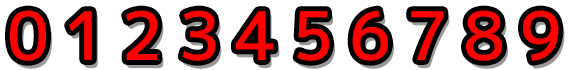
<style>
.page{position:relative;width:570px;height:70px;background:#ffffff}
.page>*{position:absolute;margin:0}
.t1{font:66.7px "07YasashisaAntique";color:#ff0000}
</style>
<div class="page">
<p class="t1" style="left:10px;top:10px;width:36px;height:51px">0</p>
<p class="t1" style="left:69px;top:11px;width:23px;height:49px">1</p>
<p class="t1" style="left:126px;top:10px;width:32px;height:50px">2</p>
<p class="t1" style="left:182px;top:10px;width:34px;height:51px">3</p>
<p class="t1" style="left:236px;top:11px;width:38px;height:49px">4</p>
<p class="t1" style="left:297px;top:11px;width:32px;height:50px">5</p>
<p class="t1" style="left:352px;top:10px;width:36px;height:51px">6</p>
<p class="t1" style="left:411px;top:11px;width:33px;height:49px">7</p>
<p class="t1" style="left:466px;top:10px;width:36px;height:51px">8</p>
<p class="t1" style="left:523px;top:10px;width:36px;height:51px">9</p>
</div>
